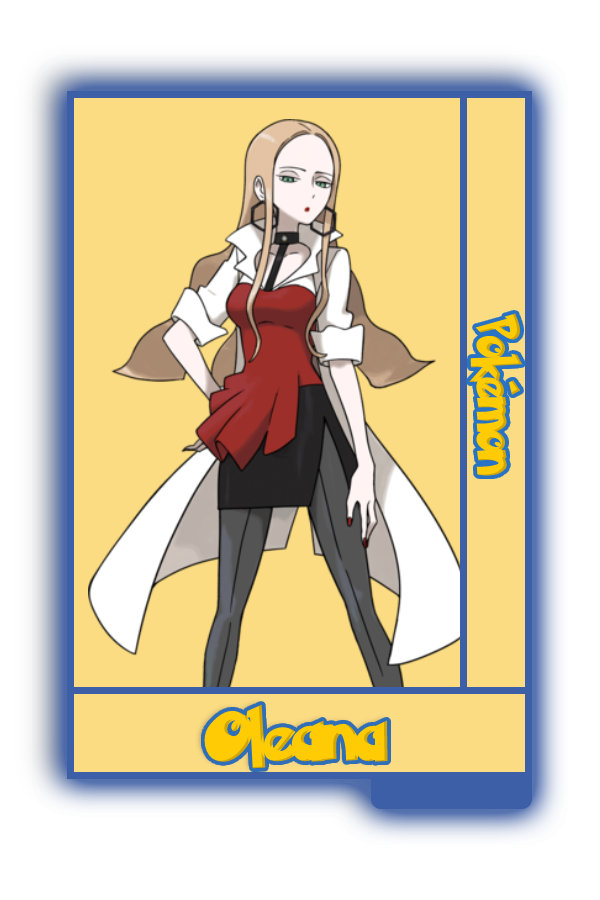
<style>
.page{position:relative;width:600px;height:900px;background:#fbdc83}
.page>*{position:absolute;margin:0}
.t1{font:48.8px "PokemonSolidNormal";color:#ffcb05;scale:0.8 1}
.t2{font:60.1px "PokemonSolidNormal";color:#ffcb05;scale:0.96 1}
</style>
<div class="page">
<p class="t1" style="left:469px;top:313px;width:54px;height:163px;rotate:90deg">Pokémon</p>
<p class="t2" style="left:204px;top:704px;width:184px;height:65px">Oleana</p>
</div>
